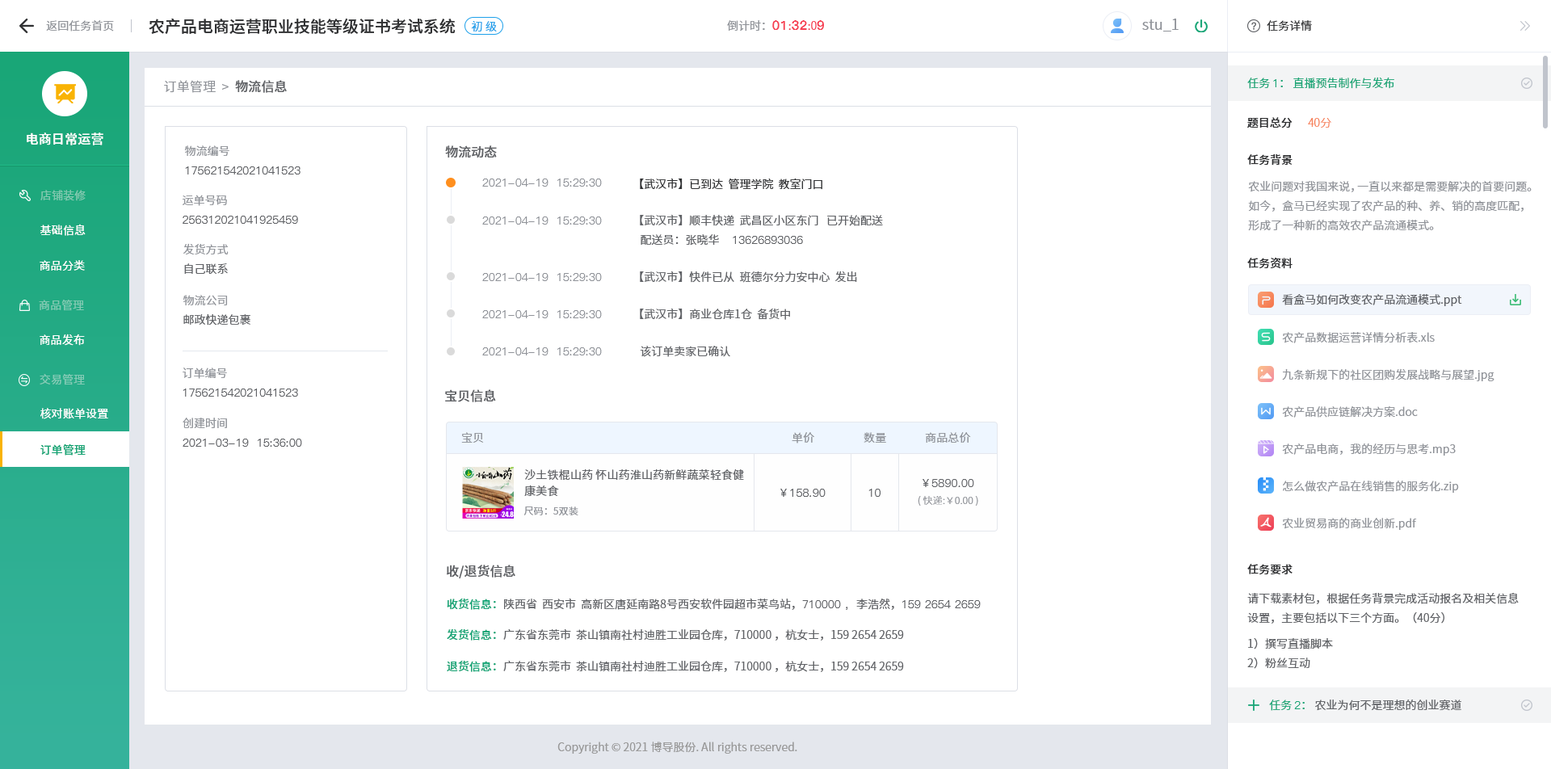
<style>
.page{position:relative;width:1551px;height:769px;background:#ffffff}
.page>*{position:absolute;margin:0}
.t1{font:16.2px "SourceHanSansCN-Medium";color:#303133}
.t2{font:11.3px "SourceHanSansCN-Normal";color:#909399}
.t3{font:11.3px "SourceHanSansCN-Normal";color:#1da0ea}
.t4{font:12.9px "PingFang-SC-Heavy";color:#f63f52}
.t5{font:11.3px "SourceHanSansCN-Normal";color:#f63f52}
.t6{font:14.5px "SourceHanSansCN-Normal";color:#909399}
.t7{font:11.3px "SourceHanSansCN-Normal";color:#303133}
.t8{font:11.3px "SourceHanSansCN-Normal";color:#19a677}
.t9{font:11.3px "PingFang-SC-Medium";color:#19a677}
.t10{font:12.9px "SourceHanSansCN-Normal";letter-spacing:0.01em;color:#909399}
.t11{font:12.9px "SourceHanSansCN-Medium";letter-spacing:0.01em;color:#606266}
.t12{font:11.3px "SourceHanSansCN-Medium";color:#303133}
.t13{font:11.3px "SourceHanSansCN-Light";color:#f67d53}
.t14{font:12.9px "SourceHanSansCN-Medium";letter-spacing:0.01em;color:#ffffff}
.t15{font:11.3px/19.4px "PingFang-SC-Medium";color:#606266}
.t16{font:11.3px/19.4px "SourceHanSansSC-Normal";color:#909399}
.t17{font:12.9px "SourceHanSansSC-Medium";color:#606266}
.t18{font:11.3px "PingFang-SC-Medium";color:#909399}
.t19{font:11.3px "SourceHanSansSC-Normal";color:#303133}
.t20{font:11.3px/19.4px "SourceHanSansCN-Normal";color:#909399}
.t21{font:11.3px "SourceHanSansCN-Regular";letter-spacing:0.01em;color:#81c9b0}
.t22{font:11.3px/19.4px "SourceHanSansSC-Normal";color:#606266}
.t23{font:11.3px "SourceHanSansCN-Normal";letter-spacing:0.01em;color:#ffffff}
.t24{font:11.3px "SourceHanSansSC-Normal";color:#606266}
.t25{font:11.3px "SourceHanSansCN-Regular";letter-spacing:0.01em;color:#82cab4}
.t26{font:11.3px "SourceHanSansCN-Normal";color:#606266}
.t27{font:11.3px "SourceHanSansCN-Regular";letter-spacing:0.01em;color:#ffffff}
.t28{font:11.3px "SourceHanSansCN-Regular";letter-spacing:0.01em;color:#84cbb6}
.t29{font:11.3px "SourceHanSansCN-Normal";letter-spacing:0.01em;color:#909399}
.t30{font:11.3px "SourceHanSansCN-Medium";letter-spacing:0.01em;color:#19a677}
.t31{font:11.3px/16.2px "SourceHanSansCN-Normal";letter-spacing:0.01em;color:#606266}
.t32{font:11.3px "PingFang-SC-Medium";letter-spacing:0.01em;color:#606266}
.t33{font:9.7px "SourceHanSansCN-Light";letter-spacing:0.01em;color:#909399}
.t34{font:9.7px "SourceHanSansCN-Normal";letter-spacing:0.01em;color:#909399}
.t35{font:11.3px/19.4px "SourceHanSansCN-Normal";color:#606266}
.t36{font:11.3px "SourceHanSansCN-Medium";color:#19a678}
.t37{font:11.3px "PingFang-SC-Medium";color:#606266}
.t38{font:11.3px "PingFang-SC-Medium";color:#1aa678}
.t39{font:11.3px "SourceHanSansCN-Normal";color:#1aa678}
.t40{font:11.3px "SourceHanSansCN-Normal";color:#999999}
</style>
<div class="page">
<p class="t1" style="left:149px;top:18px;width:307px;height:16px">农产品电商运营职业技能等级证书考试系统</p>
<p class="t2" style="left:46px;top:20px;width:68px;height:12px">返回任务首页</p>
<p class="t3" style="left:471px;top:21px;width:26px;height:11px">初 级</p>
<p class="t2" style="left:727px;top:20px;width:97px;height:12px">倒计时：<span class="t4">01</span><span class="t5">:</span><span class="t4">32</span><span class="t5">:0</span><span class="t4">9</span></p>
<p class="t6" style="left:1142px;top:19px;width:36px;height:13px">stu_1</p>
<p class="t7" style="left:1266px;top:20px;width:46px;height:12px">任务详情</p>
<p class="t8" style="left:1247px;top:77px;width:147px;height:12px">任务 <span class="t9">1</span>： 直播预告制作与发布</p>
<p class="t10" style="left:164px;top:80px;width:123px;height:13px">订单管理  &gt;<span class="t11">  物流信息</span></p>
<p class="t12" style="left:1247px;top:117px;width:45px;height:11px">题目总分</p>
<p class="t13" style="left:1308px;top:118px;width:23px;height:10px">40分</p>
<p class="t14" style="left:27px;top:132px;width:76px;height:13px">电商日常运营</p>
<p class="t15" style="left:184px;top:145px;width:116px;height:29px"><span class="t16">物流编号<br></span>175621542021041523</p>
<p class="t17" style="left:445px;top:145px;width:52px;height:13px">物流动态</p>
<p class="t12" style="left:1247px;top:153px;width:45px;height:13px">任务背景</p>
<p class="t18" style="left:482px;top:179px;width:120px;height:8px">2021-04-19  15:29:30</p>
<p class="t19" style="left:640px;top:178px;width:182px;height:12px">【武汉市】已到达  管理学院  教室门口</p>
<p class="t20" style="left:1248px;top:181px;width:283px;height:50px">农业问题对我国来说，一直以来都是需要解决的首要问题。如今，盒马已经实现了农产品的种、养、销的高度匹配，形成了一种新的高效农产品流通模式。</p>
<p class="t21" style="left:40px;top:190px;width:46px;height:11px">店铺装修</p>
<p class="t15" style="left:183px;top:195px;width:115px;height:29px"><span class="t16">运单号码<br></span>256312021041925459</p>
<p class="t18" style="left:482px;top:216px;width:120px;height:9px">2021-04-19  15:29:30</p>
<p class="t22" style="left:640px;top:214px;width:243px;height:32px">【武汉市】顺丰快递  武昌区小区东门   已开始配送     <br>   配送员：张晓华     <span class="t15">13626893036</span></p>
<p class="t23" style="left:40px;top:224px;width:46px;height:12px">基础信息</p>
<p class="t16" style="left:183px;top:243px;width:46px;height:31px">发货方式<br><span class="t22">自己联系</span></p>
<p class="t12" style="left:1247px;top:257px;width:45px;height:12px">任务资料</p>
<p class="t23" style="left:40px;top:260px;width:45px;height:11px">商品分类</p>
<p class="t18" style="left:482px;top:273px;width:120px;height:8px">2021-04-19  15:29:30</p>
<p class="t24" style="left:640px;top:271px;width:217px;height:12px">【武汉市】快件已从  班德尔分力安中心  发出</p>
<p class="t25" style="left:39px;top:300px;width:45px;height:11px">商品管理</p>
<p class="t22" style="left:183px;top:295px;width:67px;height:31px"><span class="t16">物流公司<br></span>邮政快递包裹</p>
<p class="t26" style="left:1282px;top:294px;width:180px;height:12px">看盒马如何改变农产品流通模式.ppt</p>
<p class="t18" style="left:482px;top:310px;width:120px;height:8px">2021-04-19  15:29:30</p>
<p class="t24" style="left:640px;top:308px;width:150px;height:12px">【武汉市】商业仓库1仓  备货中</p>
<p class="t27" style="left:40px;top:334px;width:45px;height:12px">商品发布</p>
<p class="t2" style="left:1282px;top:332px;width:152px;height:11px">农产品数据运营详情分析表.xls</p>
<p class="t18" style="left:482px;top:347px;width:120px;height:8px">2021-04-19  15:29:30</p>
<p class="t24" style="left:640px;top:346px;width:90px;height:11px">该订单卖家已确认</p>
<p class="t28" style="left:40px;top:374px;width:45px;height:11px">交易管理</p>
<p class="t15" style="left:183px;top:368px;width:115px;height:29px"><span class="t16">订单编号<br></span>175621542021041523</p>
<p class="t2" style="left:1282px;top:368px;width:212px;height:13px">九条新规下的社区团购发展战略与展望.jpg</p>
<p class="t17" style="left:445px;top:389px;width:51px;height:13px">宝贝信息</p>
<p class="t23" style="left:40px;top:408px;width:68px;height:11px">核对账单设置</p>
<p class="t2" style="left:1282px;top:406px;width:136px;height:12px">农产品供应链解决方案.doc</p>
<p class="t15" style="left:183px;top:418px;width:119px;height:29px"><span class="t16">创建时间<br></span>2021-03-19  15:36:00</p>
<p class="t29" style="left:461px;top:432px;width:23px;height:11px">宝贝</p>
<p class="t29" style="left:792px;top:432px;width:22px;height:11px">单价</p>
<p class="t29" style="left:863px;top:432px;width:23px;height:11px">数量</p>
<p class="t29" style="left:925px;top:432px;width:46px;height:11px">商品总价</p>
<p class="t30" style="left:40px;top:443px;width:46px;height:13px">订单管理</p>
<p class="t2" style="left:1282px;top:443px;width:173px;height:13px">农产品电商，我的经历与思考.mp3</p>
<p class="t31" style="left:524px;top:469px;width:220px;height:28px">沙土铁棍山药 怀山药淮山药新鲜蔬菜轻食健康美食</p>
<p class="t32" style="left:922px;top:479px;width:52px;height:8px">￥5890.00</p>
<p class="t2" style="left:1283px;top:481px;width:176px;height:12px">怎么做农产品在线销售的服务化.zip</p>
<p class="t32" style="left:780px;top:489px;width:45px;height:8px">￥158.90</p>
<p class="t32" style="left:868px;top:489px;width:12px;height:8px">10</p>
<p class="t33" style="left:918px;top:496px;width:60px;height:10px">( 快递:￥0.00 )</p>
<p class="t34" style="left:524px;top:506px;width:54px;height:9px">尺码：5双装</p>
<p class="t2" style="left:1282px;top:518px;width:135px;height:12px">农业贸易商的商业创新.pdf</p>
<p class="t17" style="left:447px;top:565px;width:68px;height:13px">收/退货信息</p>
<p class="t12" style="left:1247px;top:564px;width:45px;height:11px">任务要求</p>
<p class="t35" style="left:1247px;top:592px;width:271px;height:77px">请下载素材包，根据任务背景完成活动报名及相关信息设置，主要包括以下三个方面。（40分）<br>1）撰写直播脚本<br>2）粉丝互动</p>
<p class="t26" style="left:447px;top:598px;width:534px;height:12px"><span class="t36">收货信息：</span>陕西省  西安市  高新区唐延南路8号西安软件园超市菜鸟站，<span class="t37">710000 ，</span>李浩然，<span class="t37">159 2654 2659</span></p>
<p class="t26" style="left:447px;top:628px;width:457px;height:13px"><span class="t36">发货信息：</span>广东省东莞市  茶山镇南社村迪胜工业园仓库，710000 ，杭女士，159 2654 2659</p>
<p class="t26" style="left:447px;top:660px;width:457px;height:12px"><span class="t36">退货信息：</span>广东省东莞市  茶山镇南社村迪胜工业园仓库，710000 ，杭女士，159 2654 2659</p>
<p class="t26" style="left:1269px;top:699px;width:192px;height:12px"><span class="t8">任务 </span><span class="t38">2</span><span class="t39">：</span> 农业为何不是理想的创业赛道</p>
<p class="t40" style="left:557px;top:741px;width:240px;height:13px">Copyright © 2021 博导股份. All rights reserved.</p>
</div>
